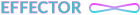
<style>
.page{position:relative;width:140px;height:15px;background:#ffffff}
.page>*{position:absolute;margin:0}
.t1{font:16.2px "Lato-Bold";color:#51b9c4;font-weight:bold}
</style>
<div class="page">
<p class="t1" style="left:1px;top:1px;width:81px;height:13px">EFFECTOR</p>
</div>
